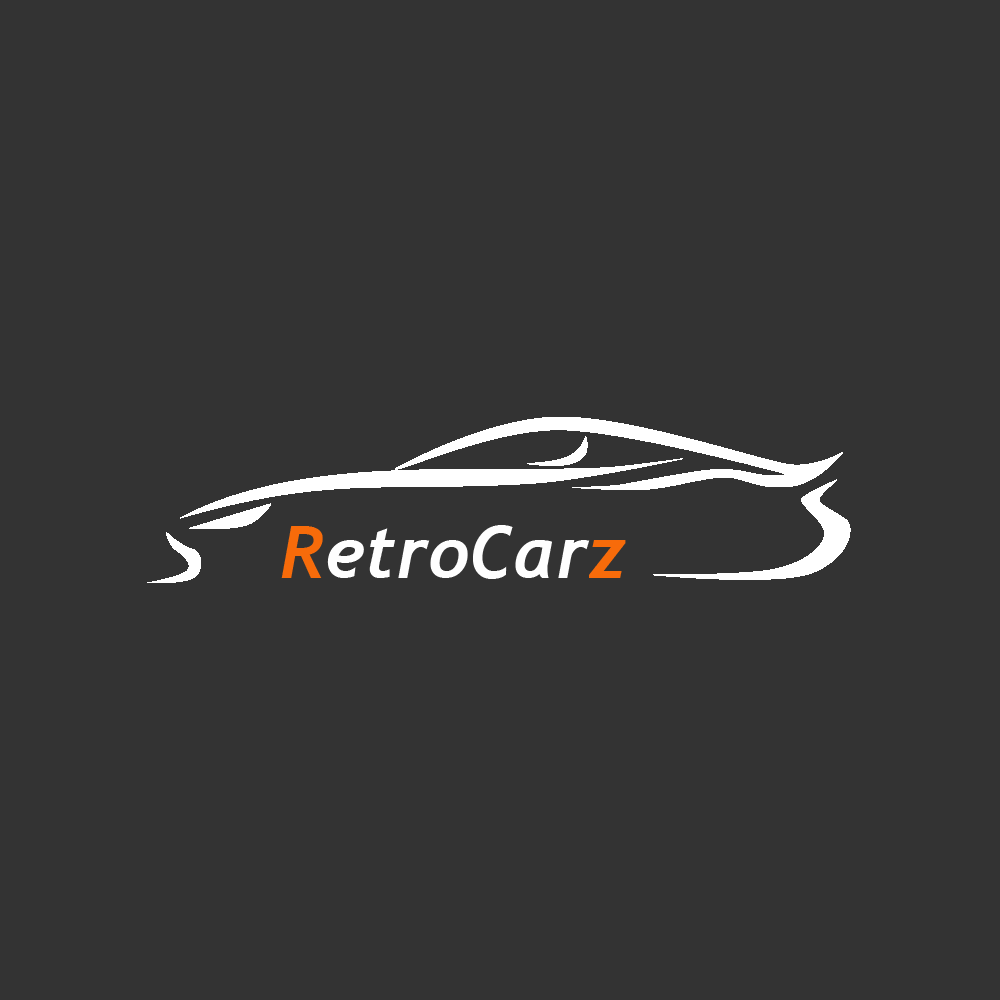
<style>
.page{position:relative;width:1000px;height:1000px;background:#333333}
.page>*{position:absolute;margin:0}
.t1{font:72px "Trebuchet-BoldItalic";color:#fefefe}
.t2{font:72px "Trebuchet-BoldItalic";color:#f76b0a}
</style>
<div class="page">
<p class="t1" style="left:281px;top:525px;width:345px;height:54px"><span class="t2">R</span>etroCar<span class="t2">z</span></p>
</div>
